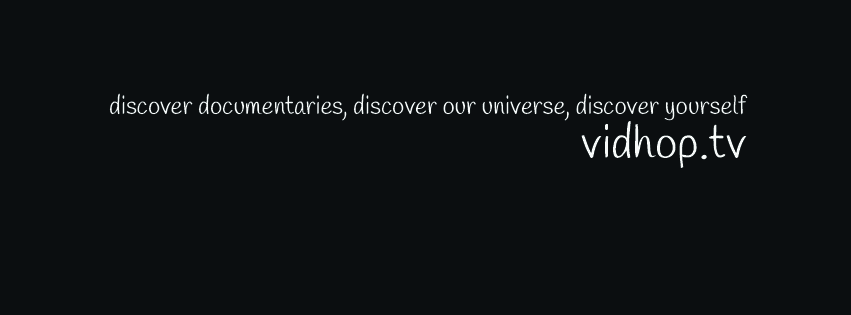
<style>
.page{position:relative;width:851px;height:315px;background:#0b0e10}
.page>*{position:absolute;margin:0}
.t1{font:25px "Handlee-Regular";color:#f7faf9}
.t2{font:45.8px "Handlee-Regular";color:#f7faf9}
</style>
<div class="page">
<p class="t1" style="left:109px;top:93px;width:639px;height:28px">discover documentaries, discover our universe, discover yourself</p>
<p class="t2" style="left:581px;top:121px;width:166px;height:47px">vidhop.tv</p>
</div>
